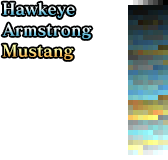
<style>
.page{position:relative;width:168px;height:160px;background:#ffffff}
.page>*{position:absolute;margin:0}
.t1{font:16px "MatisseProN-B";letter-spacing:0.01em}
</style>
<div class="page">
<p class="t1" style="left:2px;top:2px;width:73px;height:16px">Hawkeye</p>
<p class="t1" style="left:2px;top:23px;width:90px;height:16px">Armstrong</p>
<p class="t1" style="left:2px;top:44px;width:72px;height:16px">Mustang</p>
</div>
